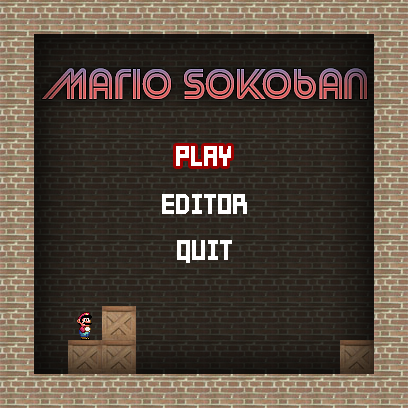
<style>
.page{position:relative;width:408px;height:408px}
.page>*{position:absolute;margin:0}
.t1{font:45px "StreetCred-Regular"}
.t2{font:30px "Players-Regular";color:#ffffff}
</style>
<div class="page">
<p class="t1" style="left:42px;top:68px;width:325px;height:31px">Mario Sokoban</p>
<p class="t2" style="left:176px;top:146px;width:55px;height:20px">PLAY</p>
<p class="t2" style="left:176px;top:146px;width:55px;height:20px">PLAY</p>
<p class="t2" style="left:162px;top:194px;width:85px;height:20px">EDITOR</p>
<p class="t2" style="left:177px;top:240px;width:55px;height:23px">QUIT</p>
</div>
